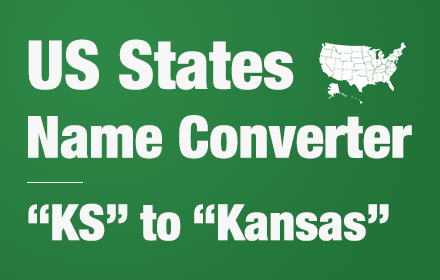
<style>
.page{position:relative;width:440px;height:280px}
.page>*{position:absolute;margin:0}
.t1{font:67.5px "HelveticaNeue-CondensedBlack";color:#f7f7f7}
.t2{font:58.3px "HelveticaNeue-CondensedBlack";color:#f7f7f7}
.t3{font:50px "HelveticaNeue-CondensedBlack";color:#f7f7f7}
</style>
<div class="page">
<p class="t1" style="left:28px;top:39px;width:266px;height:51px">US States</p>
<p class="t2" style="left:28px;top:115px;width:384px;height:44px">Name Converter</p>
<p class="t3" style="left:28px;top:203px;width:361px;height:38px">“KS” to “Kansas”</p>
</div>
